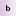
<style>
.page{position:relative;width:16px;height:16px}
.page>*{position:absolute;margin:0}
.t1{font:8px "MyriadPro-Regular";color:#000000}
</style>
<div class="page">
<p class="t1" style="left:6px;top:5px;width:5px;height:6px">b</p>
</div>
